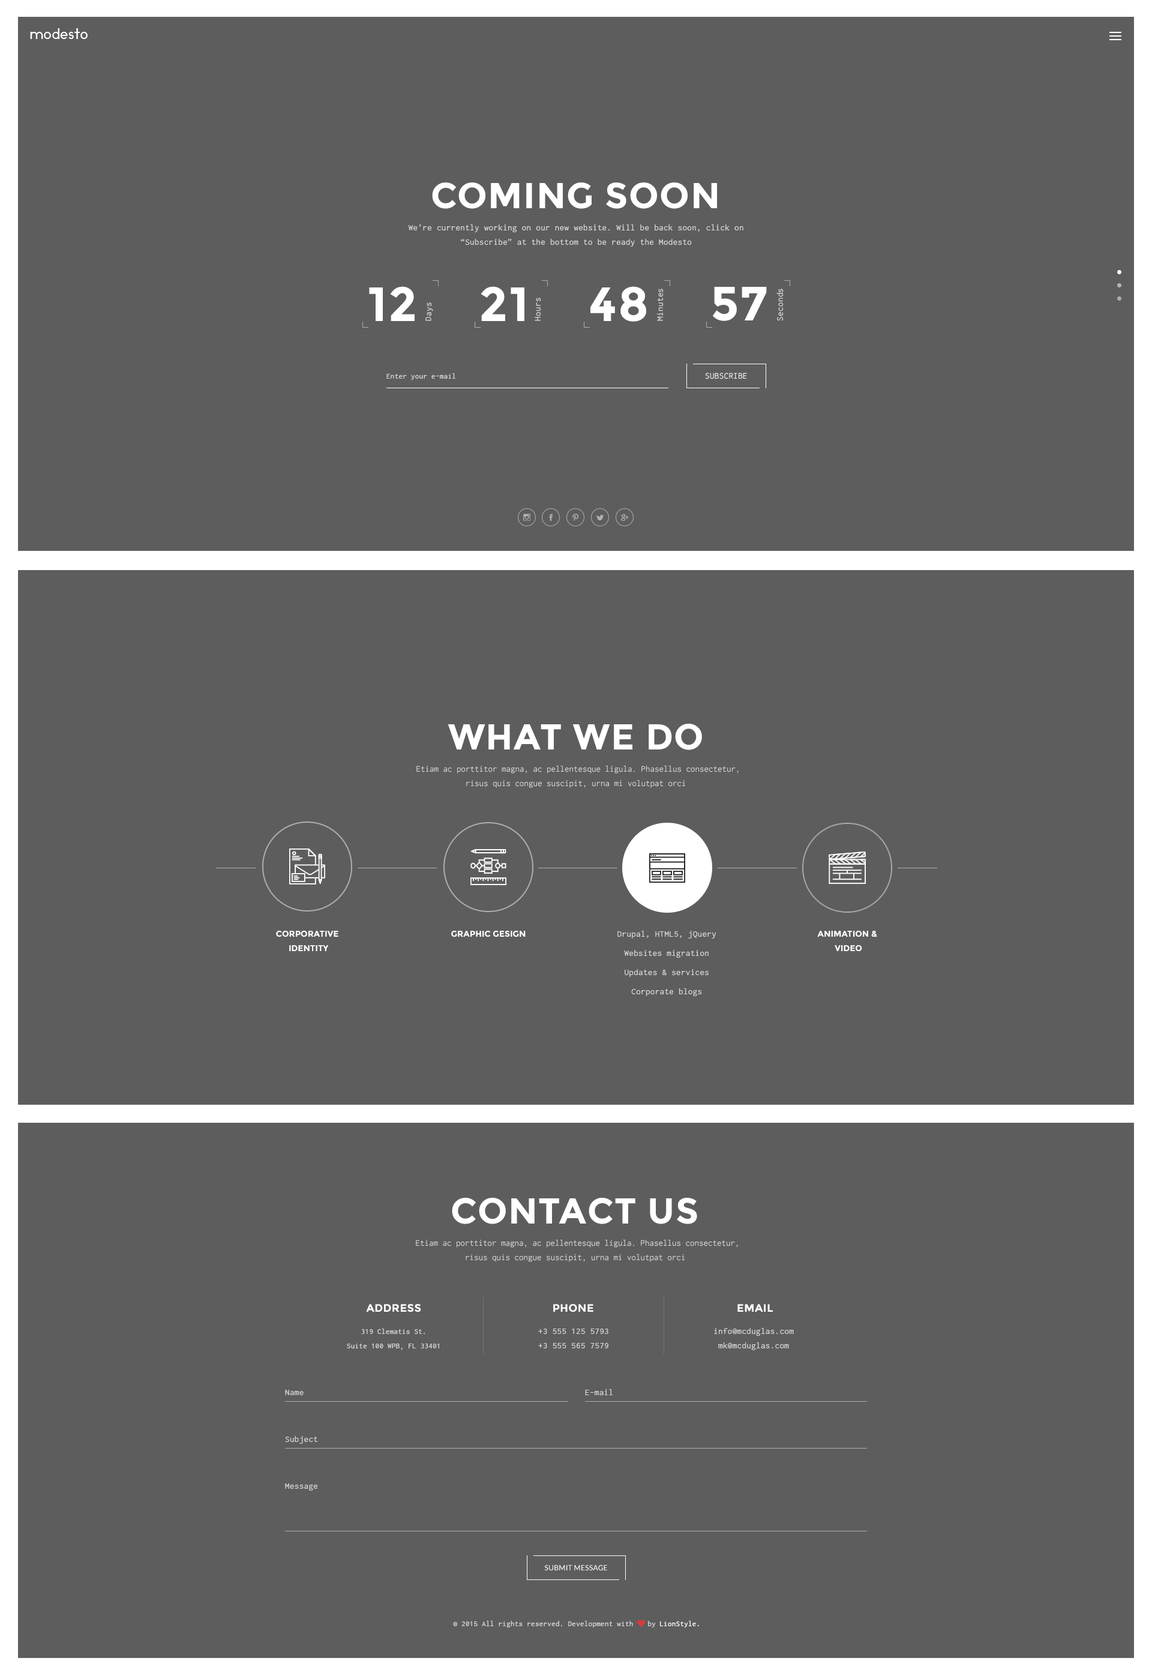
<style>
.page{position:relative;width:1152px;height:1676px;background:#5d5d5d}
.page>*{position:absolute;margin:0}
.t1{font:14.4px "Ikaros";letter-spacing:0.025em;color:#ffffff}
.t2{font:36px "Montserrat-Bold";letter-spacing:0.025em;color:#ffffff;text-transform:uppercase}
.t3{font:9px/14.4px "Inconsolata";letter-spacing:0.025em;color:#d7d7d7}
.t4{font:48px "Montserrat-Bold";letter-spacing:0.025em;color:#ffffff}
.t5{font:9px "Inconsolata";letter-spacing:0.025em;color:#d7d7d7}
.t6{font:7.8px "Inconsolata";letter-spacing:0.025em;color:#d7d7d7}
.t7{font:9px "Inconsolata";letter-spacing:0.025em;color:#fefefe;text-transform:uppercase}
.t8{font:9px/14.4px "Inconsolata";color:#d7d7d7}
.t9{font:8.4px/14.4px "Montserrat-Bold";color:#ffffff;text-transform:uppercase}
.t10{font:8.4px "Montserrat-Bold";color:#ffffff;text-transform:uppercase}
.t11{font:9px/19.2px "Inconsolata";letter-spacing:0.025em;color:#d7d7d7}
.t12{font:10.8px "Montserrat-Bold";letter-spacing:0.025em;color:#ffffff;text-transform:uppercase}
.t13{font:7.8px/14.4px "Inconsolata";letter-spacing:0.025em;color:#d7d7d7}
.t14{font:7.2px "Lato-Regular";letter-spacing:0.025em;color:#ffffff;text-transform:uppercase}
.t15{font:7.8px "FontAwesome";letter-spacing:0.025em;color:#d7d7d7}
.t16{font:7.8px "Inconsolata";letter-spacing:0.025em;color:#ffffff}
</style>
<div class="page">
<p class="t1" style="left:30px;top:28px;width:58px;height:11px">modesto</p>
<p class="t2" style="left:432px;top:182px;width:285px;height:27px">coming soon</p>
<p class="t3" style="left:408px;top:224px;width:335px;height:23px;text-align:center">We’re currently working on our new website. Will be back soon, click on “Subscribe” at the bottom to be ready the Modesto</p>
<p class="t4" style="left:369px;top:286px;width:46px;height:35px">12</p>
<p class="t4" style="left:481px;top:286px;width:43px;height:35px">21</p>
<p class="t4" style="left:590px;top:286px;width:56px;height:36px">48</p>
<p class="t5" style="left:656px;top:289px;width:8px;height:32px;rotate:-90deg">Minutes</p>
<p class="t4" style="left:713px;top:287px;width:54px;height:34px">57</p>
<p class="t5" style="left:776px;top:289px;width:8px;height:32px;rotate:-90deg">Seconds</p>
<p class="t5" style="left:425px;top:302px;width:8px;height:19px;rotate:-90deg">Days</p>
<p class="t5" style="left:535px;top:298px;width:6px;height:23px;rotate:-90deg">Hours</p>
<p class="t6" style="left:386px;top:373px;width:69px;height:7px">Enter your e-mail</p>
<p class="t7" style="left:705px;top:373px;width:42px;height:6px">SUBSCRIBE</p>
<p class="t2" style="left:448px;top:724px;width:254px;height:26px">what we do</p>
<p class="t8" style="left:416px;top:766px;width:323px;height:22px;text-align:center">Etiam ac porttitor magna, ac pellentesque ligula. Phasellus consectetur, risus quis congue suscipit, urna mi volutpat orci</p>
<p class="t9" style="left:276px;top:931px;width:62px;height:20px;text-align:center">Corporative <br>identity</p>
<p class="t10" style="left:451px;top:931px;width:75px;height:6px">Graphic gesign</p>
<p class="t11" style="left:617px;top:931px;width:99px;height:65px;text-align:center">Drupal, HTML5, jQuery <br>Websites migration<br>Updates &amp; services<br>Corporate blogs</p>
<p class="t9" style="left:817px;top:931px;width:60px;height:20px;text-align:center">Animation &amp; <br>video</p>
<p class="t2" style="left:452px;top:1198px;width:245px;height:26px">contact us</p>
<p class="t8" style="left:416px;top:1240px;width:322px;height:22px;text-align:center">Etiam ac porttitor magna, ac pellentesque ligula. Phasellus consectetur, risus quis congue suscipit, urna mi volutpat orci</p>
<p class="t12" style="left:366px;top:1304px;width:55px;height:8px">address</p>
<p class="t12" style="left:553px;top:1304px;width:40px;height:8px">phone</p>
<p class="t12" style="left:737px;top:1304px;width:36px;height:8px">email</p>
<p class="t13" style="left:347px;top:1328px;width:92px;height:22px;text-align:center">319 Clematis St.<br>Suite 100 WPB, FL 33401</p>
<p class="t3" style="left:538px;top:1328px;width:70px;height:20px;text-align:center">+3 555 125 5793<br>+3 555 565 7579</p>
<p class="t3" style="left:714px;top:1328px;width:80px;height:22px;text-align:center">info@mcduglas.com<br>mk@mcduglas.com</p>
<p class="t5" style="left:285px;top:1390px;width:19px;height:5px">Name</p>
<p class="t5" style="left:585px;top:1389px;width:28px;height:6px">E-mail</p>
<p class="t5" style="left:285px;top:1436px;width:33px;height:8px">Subject</p>
<p class="t5" style="left:285px;top:1483px;width:32px;height:7px">Message</p>
<p class="t14" style="left:545px;top:1565px;width:62px;height:5px">SUBMIT MESSAGE</p>
<p class="t6" style="left:453px;top:1619px;width:203px;height:8px">© 2015 All rights reserved. Development with <span class="t15">♥ </span>by</p>
<p class="t16" style="left:660px;top:1621px;width:39px;height:6px">LionStyle.</p>
</div>
